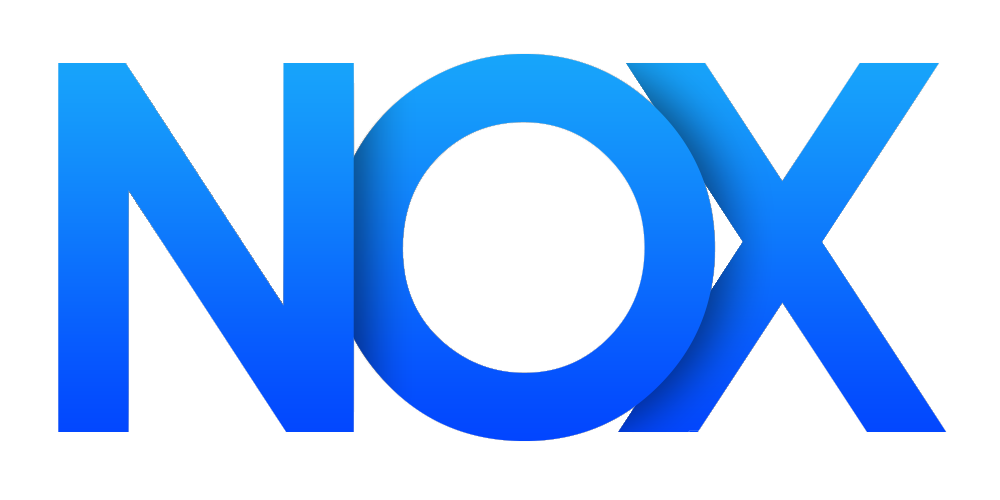
<style>
.page{position:relative;width:1000px;height:500px;background:#ffffff}
.page>*{position:absolute;margin:0}
.t1{font:513.6px "CenturyGothic-Bold";letter-spacing:-0.1em}
</style>
<div class="page">
<p class="t1" style="left:332px;top:54px;width:383px;height:387px">O</p>
<p class="t1" style="left:58px;top:63px;width:296px;height:369px">N</p>
<p class="t1" style="left:618px;top:63px;width:329px;height:369px">X</p>
</div>
